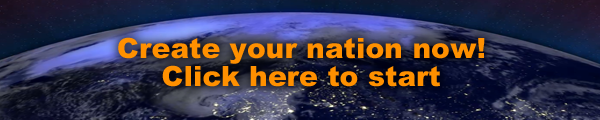
<style>
.page{position:relative;width:600px;height:120px}
.page>*{position:absolute;margin:0}
.t1{font:28.1px/28.5px "Arial-Black";color:#ff9000}
</style>
<div class="page">
<p class="t1" style="left:118px;top:37px;width:367px;height:50px;text-align:center">Create your nation now!<br>Click here to start</p>
</div>
